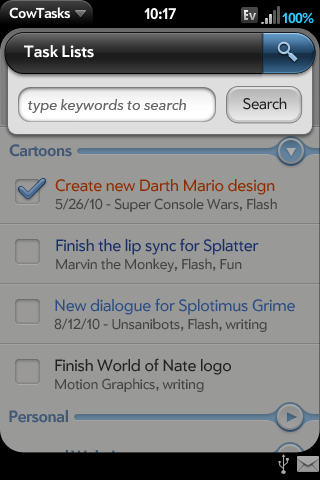
<style>
.page{position:relative;width:320px;height:480px;background:#999998}
.page>*{position:absolute;margin:0}
.t1{font:16px "Prelude-Bold";letter-spacing:-0.005em;color:#ffffff}
.t2{font:15px "Prelude-MediumOblique";color:#666666}
.t3{font:15px "Prelude-Medium";letter-spacing:-0.02em;color:#222222}
.t4{font:16px "Prelude-Bold";letter-spacing:-0.03em;color:#425976}
.t5{font:14px/18px "Prelude-Medium";letter-spacing:-0.015em}
.t6{font:16px/18px "Prelude-Medium";letter-spacing:-0.015em}
.t7{font:16px/18px "Prelude-Medium";letter-spacing:-0.015em;color:#333333}
.t8{font:14px/18px "Prelude-Medium";letter-spacing:-0.015em;color:#666666}
.t9{font:16px "Prelude-Bold";letter-spacing:-0.03em;color:#000000}
</style>
<div class="page">
<p class="t1" style="left:24px;top:45px;width:70px;height:13px">Task Lists</p>
<p class="t2" style="left:28px;top:99px;width:158px;height:14px">type keywords to search</p>
<p class="t3" style="left:243px;top:97px;width:44px;height:13px">Search</p>
<p class="t4" style="left:9px;top:144px;width:63px;height:13px">Cartoons</p>
<p class="t5" style="left:55px;top:179px;width:222px;height:33px"><span class="t6">Create new Darth Mario design<br></span>5/26/10 - Super Console Wars, Flash</p>
<p class="t6" style="left:56px;top:238px;width:203px;height:34px">Finish the lip sync for Splatter<br><span class="t5">Marvin the Monkey, Flash, Fun</span></p>
<p class="t5" style="left:54px;top:298px;width:241px;height:34px"><span class="t6">New dialogue for Splotimus Grime<br></span>8/12/10 - Unsanibots, Flash, writing</p>
<p class="t7" style="left:55px;top:358px;width:176px;height:34px">Finish World of Nate logo<br><span class="t8">Motion Graphics, writing</span></p>
<p class="t4" style="left:9px;top:410px;width:59px;height:13px">Personal</p>
<p class="t9" style="left:9px;top:450px;width:127px;height:13px">Personal Websites</p>
</div>
